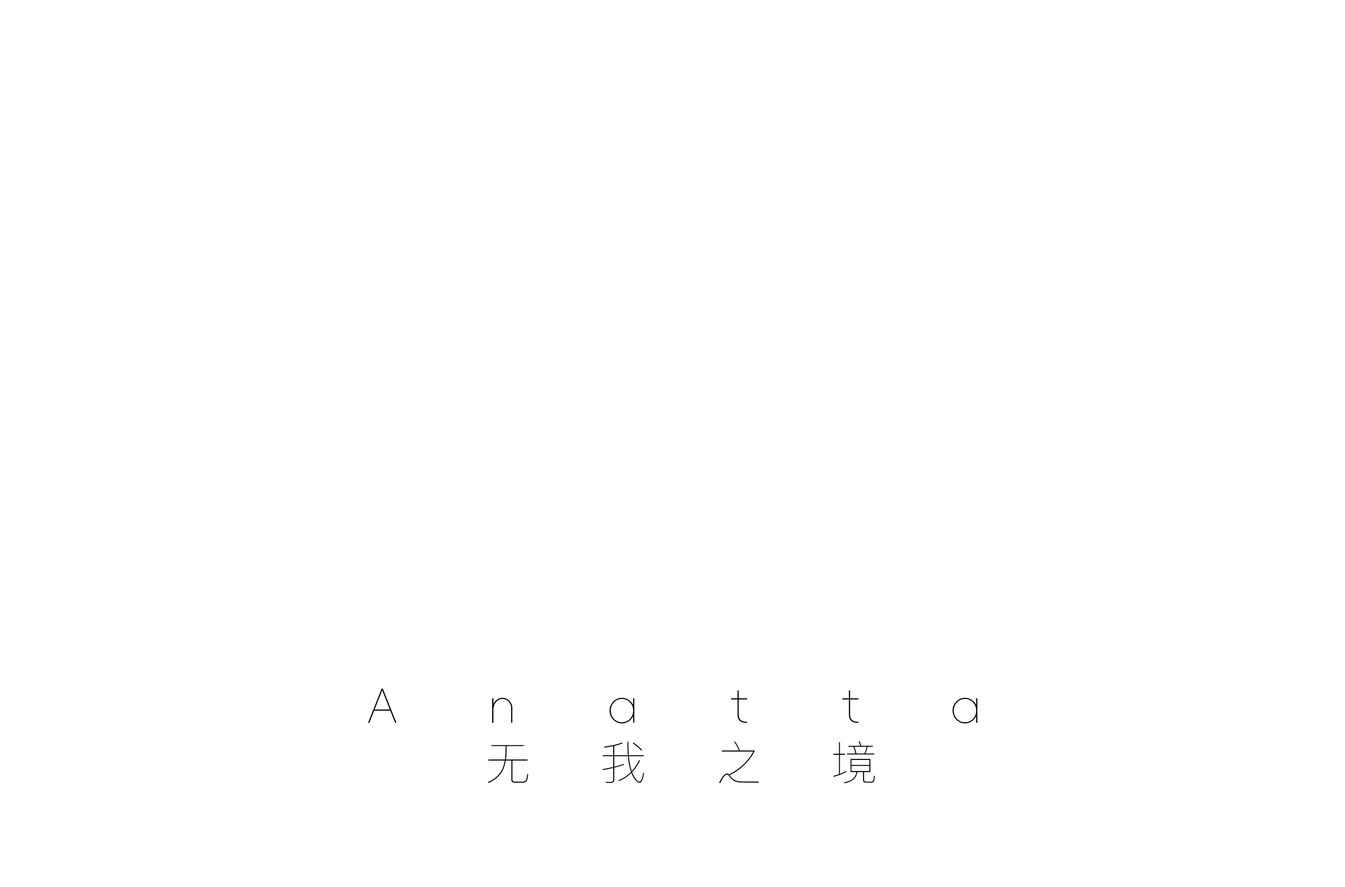
<style>
.page{position:relative;width:1345px;height:887px;background:#ffffff}
.page>*{position:absolute;margin:0}
.t1{font:46.1px "AlimamaFangYuanTiVF-ThinSquare";letter-spacing:2em;color:#000000}
.t2{font:46.1px "PingFangSC-Ultralight";letter-spacing:1.5em;color:#000000}
</style>
<div class="page">
<p class="t1" style="left:368px;top:688px;width:609px;height:35px">Anatta</p>
<p class="t2" style="left:487px;top:741px;width:388px;height:42px">无我之境</p>
</div>
